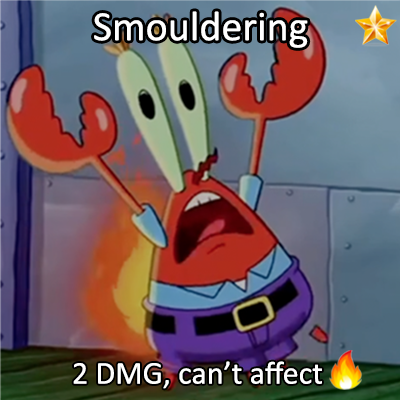
<style>
.page{position:relative;width:400px;height:400px}
.page>*{position:absolute;margin:0}
.t1{font:72px "Calibri";color:#ffffff}
.t2{font:55px "Calibri";color:#ffffff}
</style>
<div class="page">
<p class="t1" style="left:94px;top:11px;width:214px;height:37px">Smouldering</p>
<p class="t2" style="left:73px;top:361px;width:249px;height:28px">2 DMG, can’t affect</p>
</div>
